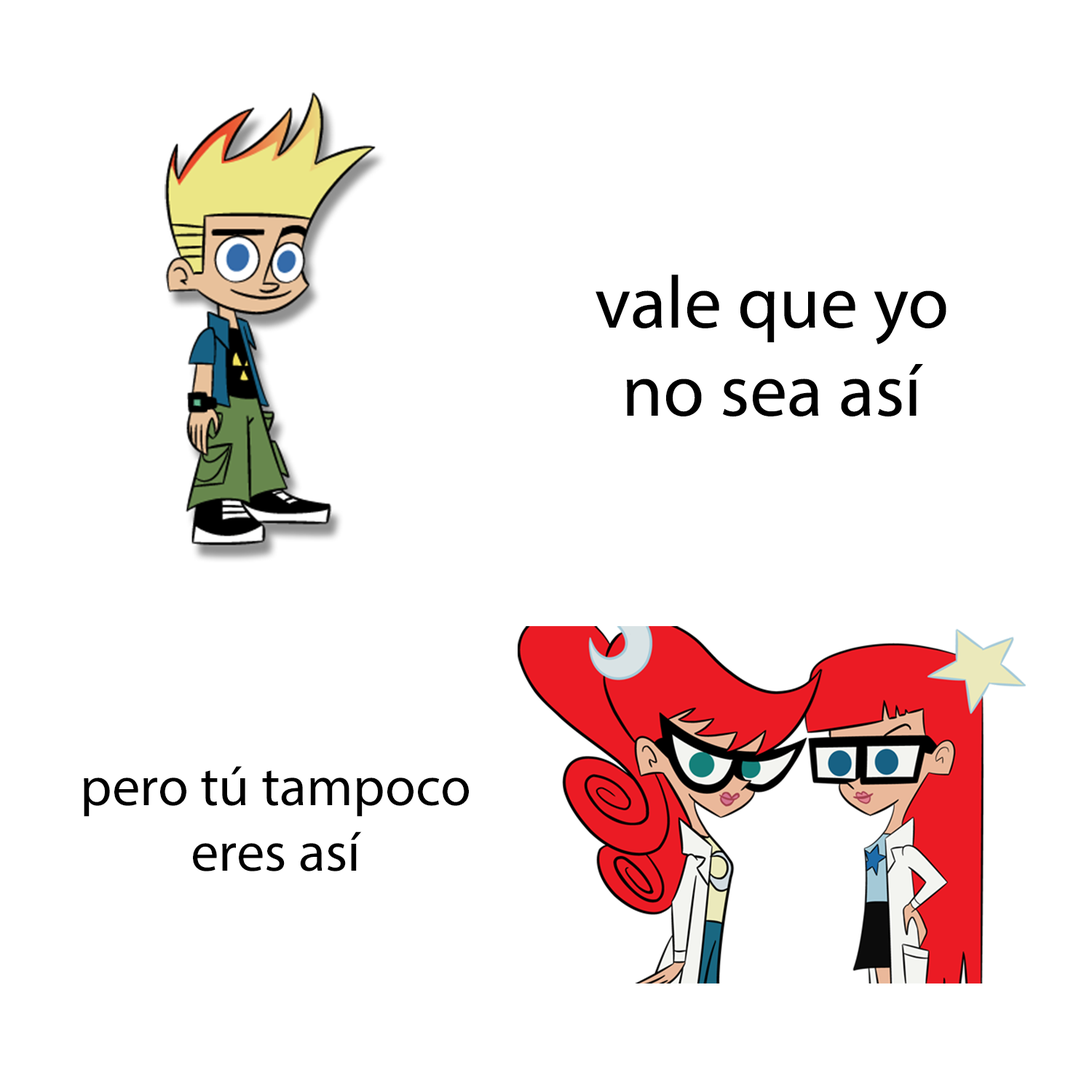
<style>
.page{position:relative;width:1092px;height:1092px;background:#ffffff}
.page>*{position:absolute;margin:0}
.t1{font:74.6px "MyriadPro-Regular";color:#000000}
.t2{font:55.8px "MyriadPro-Regular";color:#000000}
</style>
<div class="page">
<p class="t1" style="left:595px;top:274px;width:351px;height:143px;text-align:center">vale que yo<br>no sea así</p>
<p class="t2" style="left:84px;top:766px;width:385px;height:105px;text-align:center">pero tú tampoco<br>eres así</p>
</div>
